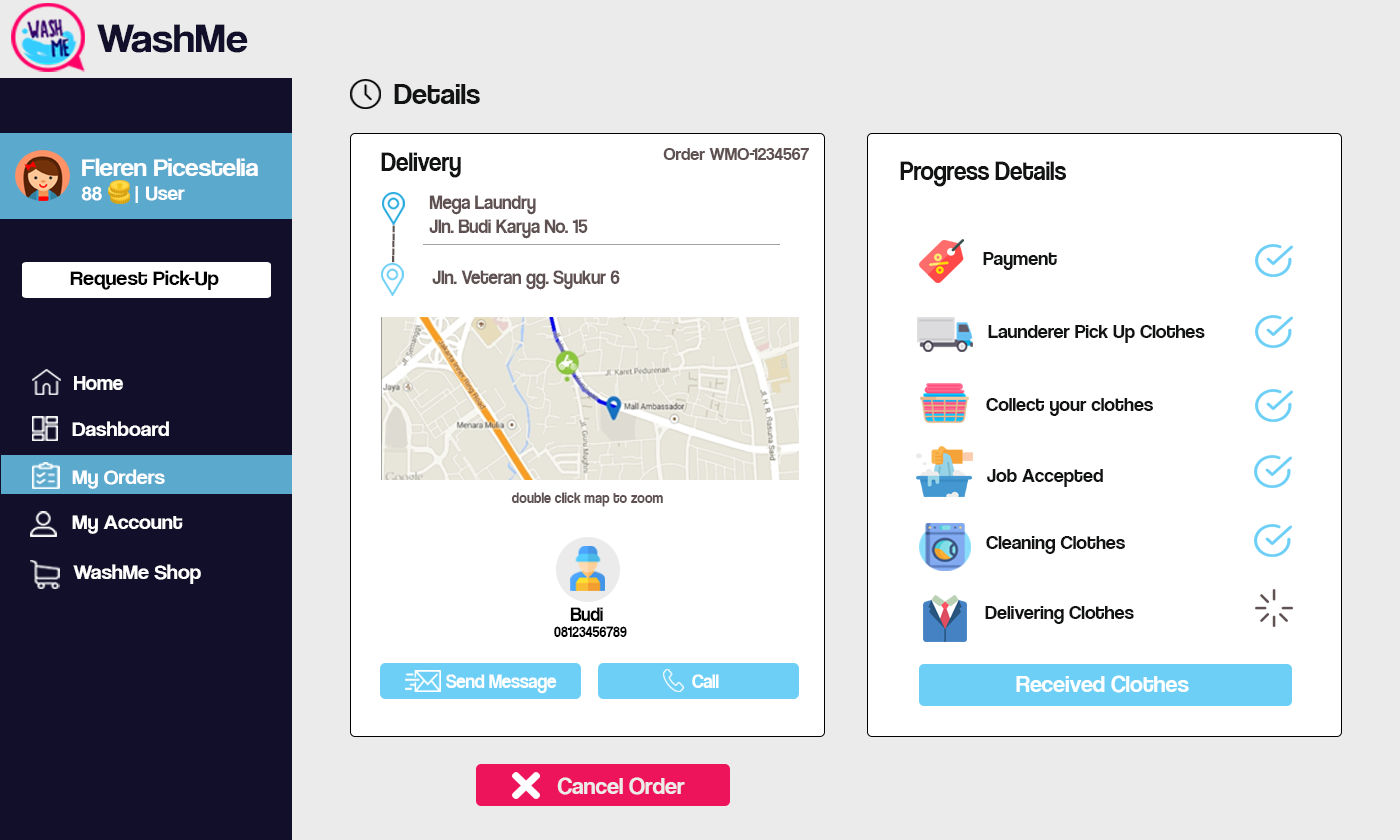
<style>
.page{position:relative;width:1400px;height:840px;background:#ffffff}
.page>*{position:absolute;margin:0}
.t1{font:42.1px "CoolveticaRg-Regular";color:#120f2b;scale:1.05 1}
.t2{font:30px "CoolveticaRg-Regular";color:#121313}
.t3{font:18px "CoolveticaRg-Regular";color:#605252}
.t4{font:25.2px "CoolveticaRg-Regular";color:#ffffff;scale:1.05 1}
.t5{font:20px "CoolveticaRg-Regular";color:#ffffff;scale:1.05 1}
.t6{font:27px "CoolveticaRg-Regular";color:#121313;scale:0.91 1}
.t7{font:20.3px "CoolveticaRg-Regular";color:#605252;scale:0.91 1}
.t8{font:24.7px "CoolveticaRg-Regular";color:#605252;scale:1.09 1}
.t9{font:20px "CoolveticaRg-Regular";color:#121313}
.t10{font:21px "CoolveticaRg-Regular";color:#000000;scale:1.05 1}
.t11{font:21px "CoolveticaRg-Regular";color:#ffffff}
.t12{font:21px "CoolveticaRg-Regular";color:#ffffff;scale:1.05 1}
.t13{font:15.8px "CoolveticaRg-Regular";color:#605252;scale:0.91 1}
.t14{font:20.3px "CoolveticaRg-Regular";color:#000000;scale:0.91 1}
.t15{font:15.8px "CoolveticaRg-Regular";color:#000000;scale:0.91 1}
.t16{font:20.3px "CoolveticaRg-Regular";color:#ffffff;scale:0.91 1}
.t17{font:24px "CoolveticaRg-Regular";color:#feffff}
.t18{font:24px "CoolveticaRg-Regular";color:#ebebeb}
</style>
<div class="page">
<p class="t1" style="left:97px;top:24px;width:151px;height:29px">WashMe</p>
<p class="t2" style="left:394px;top:84px;width:86px;height:20px">Details</p>
<p class="t3" style="left:663px;top:148px;width:146px;height:12px">Order WMO-1234567</p>
<p class="t4" style="left:81px;top:158px;width:177px;height:45px">Fleren Picestelia<br><span class="t5">88      | User</span></p>
<p class="t6" style="left:381px;top:152px;width:80px;height:26px">Delivery</p>
<p class="t6" style="left:900px;top:161px;width:166px;height:26px">Progress Details</p>
<p class="t7" style="left:429px;top:195px;width:159px;height:44px">Mega Laundry<br>Jln. Budi Karya No. 15</p>
<p class="t8" style="left:392px;top:225px;width:3px;height:38px;rotate:91deg">-----</p>
<p class="t9" style="left:983px;top:252px;width:74px;height:18px">Payment</p>
<p class="t10" style="left:70px;top:270px;width:149px;height:20px">Request Pick-Up</p>
<p class="t7" style="left:432px;top:270px;width:188px;height:20px">Jln. Veteran gg. Syukur 6</p>
<p class="t9" style="left:988px;top:325px;width:217px;height:18px">Launderer Pick Up Clothes</p>
<p class="t11" style="left:74px;top:376px;width:49px;height:14px">Home</p>
<p class="t9" style="left:986px;top:398px;width:167px;height:18px">Collect your clothes</p>
<p class="t12" style="left:72px;top:421px;width:97px;height:15px">Dashboard</p>
<p class="t12" style="left:72px;top:469px;width:93px;height:20px">My Orders</p>
<p class="t9" style="left:987px;top:469px;width:116px;height:18px">Job Accepted</p>
<p class="t13" style="left:511px;top:492px;width:152px;height:15px">double click map to zoom</p>
<p class="t12" style="left:72px;top:515px;width:111px;height:19px">My Account</p>
<p class="t9" style="left:986px;top:536px;width:139px;height:18px">Cleaning Clothes</p>
<p class="t12" style="left:73px;top:564px;width:128px;height:20px">WashMe Shop</p>
<p class="t9" style="left:985px;top:606px;width:149px;height:18px">Delivering Clothes</p>
<p class="t14" style="left:570px;top:607px;width:33px;height:14px">Budi</p>
<p class="t15" style="left:554px;top:626px;width:73px;height:11px">08123456789</p>
<p class="t16" style="left:446px;top:674px;width:111px;height:20px">Send Message</p>
<p class="t16" style="left:692px;top:674px;width:27px;height:14px">Call</p>
<p class="t17" style="left:1016px;top:675px;width:173px;height:18px">Received Clothes</p>
<p class="t18" style="left:557px;top:777px;width:128px;height:18px">Cancel Order</p>
</div>
